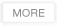
<style>
.page{position:relative;width:58px;height:26px;background:#ffffff}
.page>*{position:absolute;margin:0}
.t1{font:10.3px "HelveticaNeue-Light";letter-spacing:0.05em;color:#8c8c8c;scale:1.05 1}
</style>
<div class="page">
<p class="t1" style="left:13px;top:9px;width:32px;height:8px">MORE</p>
</div>
